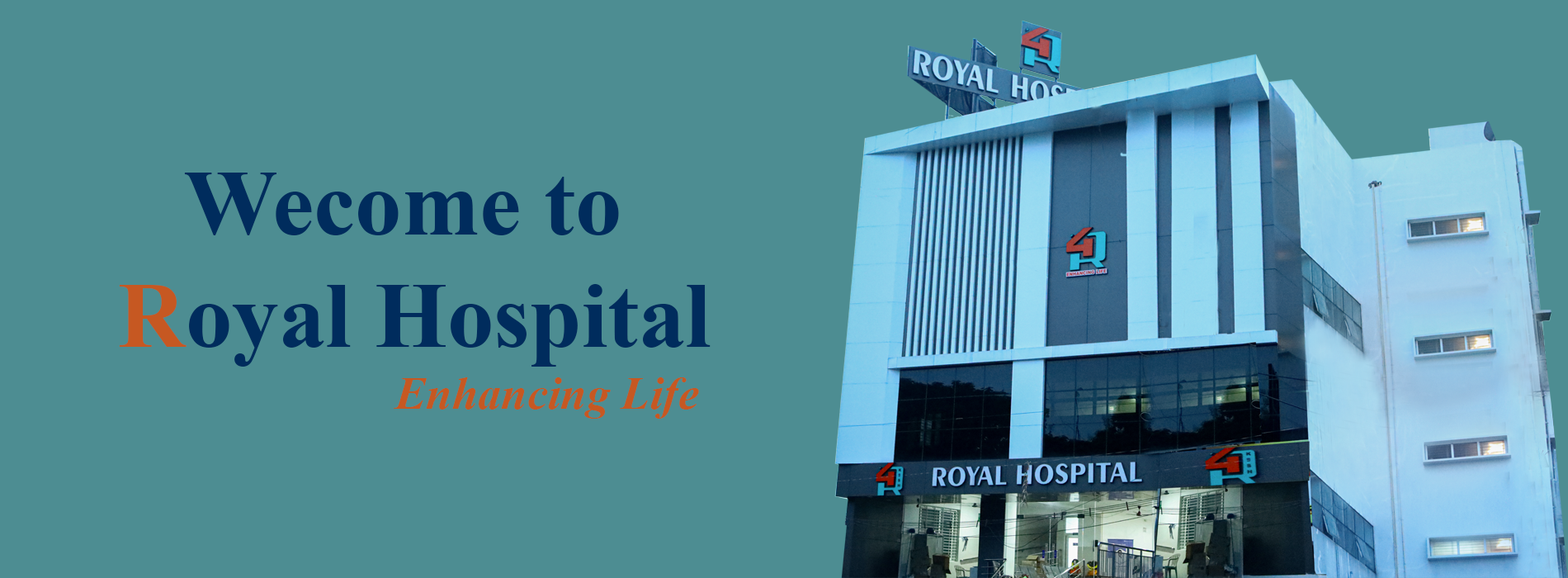
<style>
.page{position:relative;width:1568px;height:578px;background:#4d8d92}
.page>*{position:absolute;margin:0}
.t1{font:93.2px "TimesNewRomanPS-BoldMT";color:#002c5d}
.t2{font:93.2px "TimesNewRomanPS-BoldMT";color:#c65822}
.t3{font:46.6px "TimesNewRomanPS-BoldItalicMT";color:#c65822}
</style>
<div class="page">
<p class="t1" style="left:119px;top:172px;width:592px;height:194px;text-align:center">Wecome to <br><span class="t2">R</span>oyal Hospital</p>
<p class="t3" style="left:394px;top:377px;width:305px;height:41px">Enhancing Life</p>
</div>
